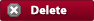
<style>
.page{position:relative;width:94px;height:21px}
.page>*{position:absolute;margin:0}
.t1{font:12px "MyriadPro-Bold";letter-spacing:-0.015em;color:#ffffff;font-weight:bold}
</style>
<div class="page">
<p class="t1" style="left:31px;top:5px;width:36px;height:10px">Delete</p>
</div>
